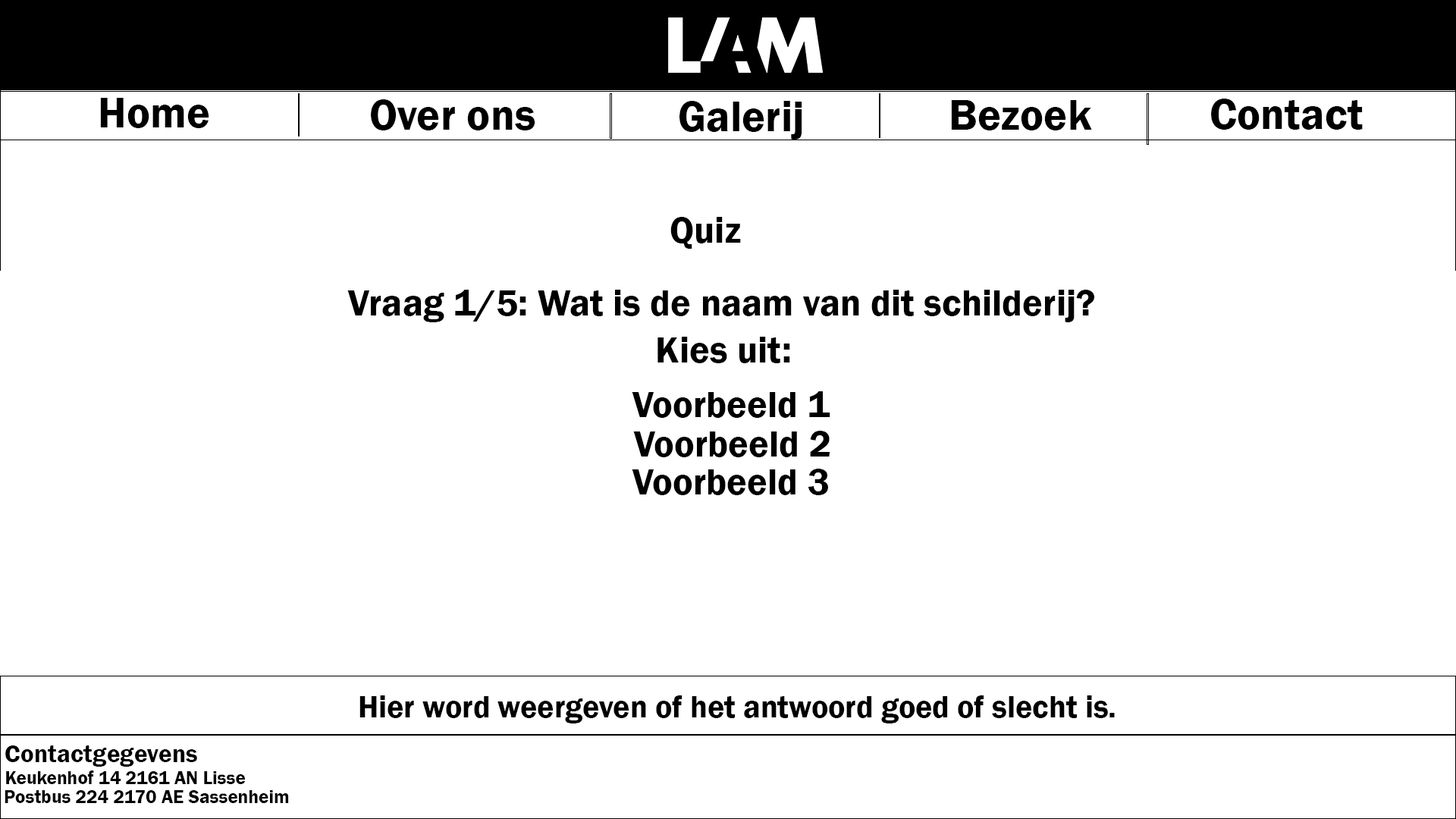
<style>
.page{position:relative;width:1456px;height:819px;background:#ffffff}
.page>*{position:absolute;margin:0}
.t1{font:44.2px "FranklinGothic-Demi";color:#000000}
.t2{font:37.9px "FranklinGothic-Demi";color:#000000}
.t3{font:31.6px "FranklinGothic-Demi";color:#000000}
.t4{font:25.3px "FranklinGothic-Demi";color:#000000}
.t5{font:19px "FranklinGothic-Demi";color:#000000}
</style>
<div class="page">
<p class="t1" style="left:100px;top:98px;width:109px;height:30px">Home</p>
<p class="t1" style="left:371px;top:99px;width:164px;height:31px">Over ons</p>
<p class="t1" style="left:679px;top:101px;width:123px;height:39px">Galerij</p>
<p class="t1" style="left:951px;top:100px;width:141px;height:30px">Bezoek</p>
<p class="t1" style="left:1211px;top:99px;width:152px;height:31px">Contact</p>
<p class="t2" style="left:670px;top:217px;width:71px;height:32px">Quiz</p>
<p class="t2" style="left:347px;top:290px;width:748px;height:32px">Vraag 1/5: Wat is de naam van dit schilderij?</p>
<p class="t2" style="left:657px;top:337px;width:133px;height:26px">Kies uit:</p>
<p class="t2" style="left:632px;top:391px;width:198px;height:27px">Voorbeeld 1</p>
<p class="t2" style="left:633px;top:431px;width:197px;height:26px">Voorbeeld 2</p>
<p class="t2" style="left:632px;top:469px;width:196px;height:26px">Voorbeeld 3</p>
<p class="t3" style="left:359px;top:695px;width:756px;height:28px">Hier word weergeven of het antwoord goed of slecht is.</p>
<p class="t4" style="left:5px;top:745px;width:192px;height:22px">Contactgegevens</p>
<p class="t5" style="left:6px;top:770px;width:239px;height:14px">Keukenhof 14 2161 AN Lisse</p>
<p class="t5" style="left:5px;top:790px;width:284px;height:13px">Postbus 224 2170 AE Sassenheim</p>
</div>
